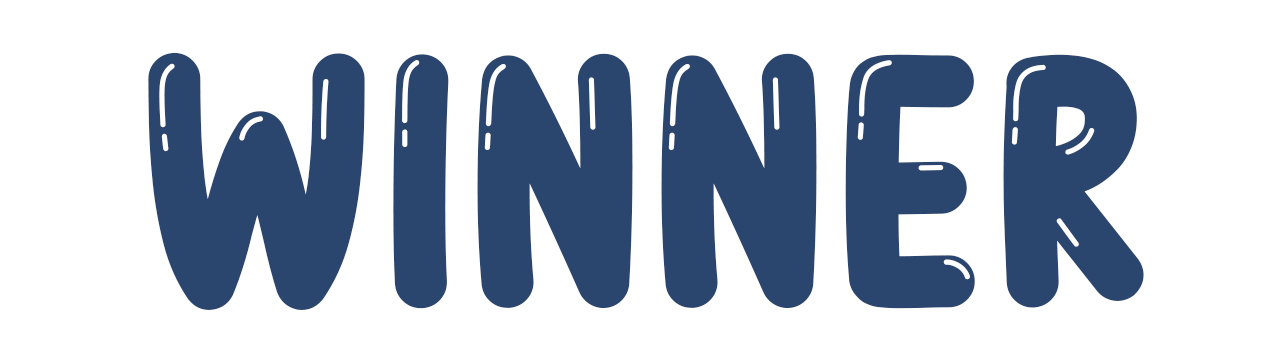
<style>
.page{position:relative;width:1263px;height:364px;background:#ffffff}
.page>*{position:absolute;margin:0}
.t1{font:362.5px "BubbleBobble";color:#2a456e}
</style>
<div class="page">
<p class="t1" style="left:148px;top:52px;width:996px;height:258px">WINNER</p>
</div>
